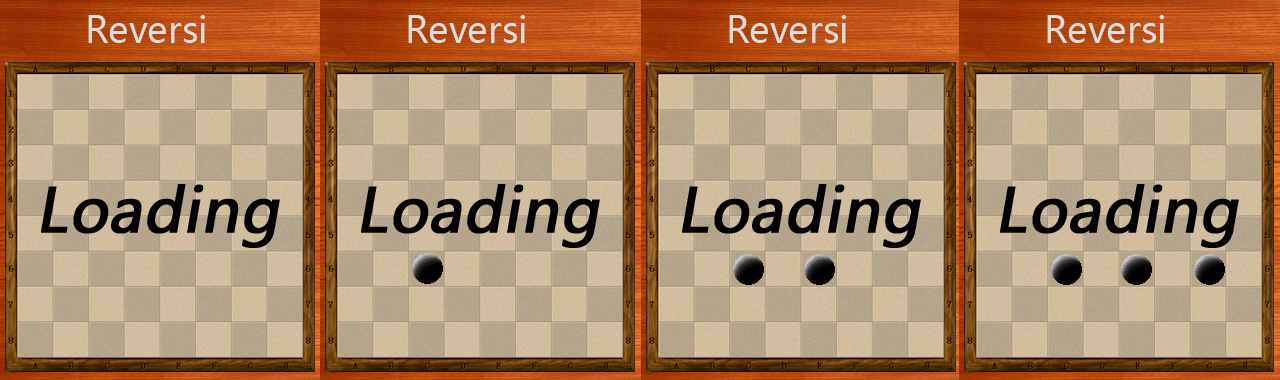
<style>
.page{position:relative;width:1280px;height:380px}
.page>*{position:absolute;margin:0}
.t1{font:36px "MicrosoftYaHei";color:#dcdcdc}
.t2{font:60px "MicrosoftYaHei";color:#000000;font-weight:bold;font-style:italic}
</style>
<div class="page">
<p class="t1" style="left:88px;top:15px;width:117px;height:28px">Reversi</p>
<p class="t2" style="left:41px;top:184px;width:239px;height:64px">Loading</p>
</div>
